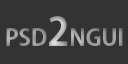
<style>
.page{position:relative;width:128px;height:64px;background:#333333}
.page>*{position:absolute;margin:0}
.t1{font:22.9px "AdobeGothicStd-Bold"}
.t2{font:38.6px "AdobeGothicStd-Bold"}
</style>
<div class="page">
<p class="t1" style="left:6px;top:16px;width:117px;height:30px">PSD<span class="t2">2</span>NGUI</p>
</div>
